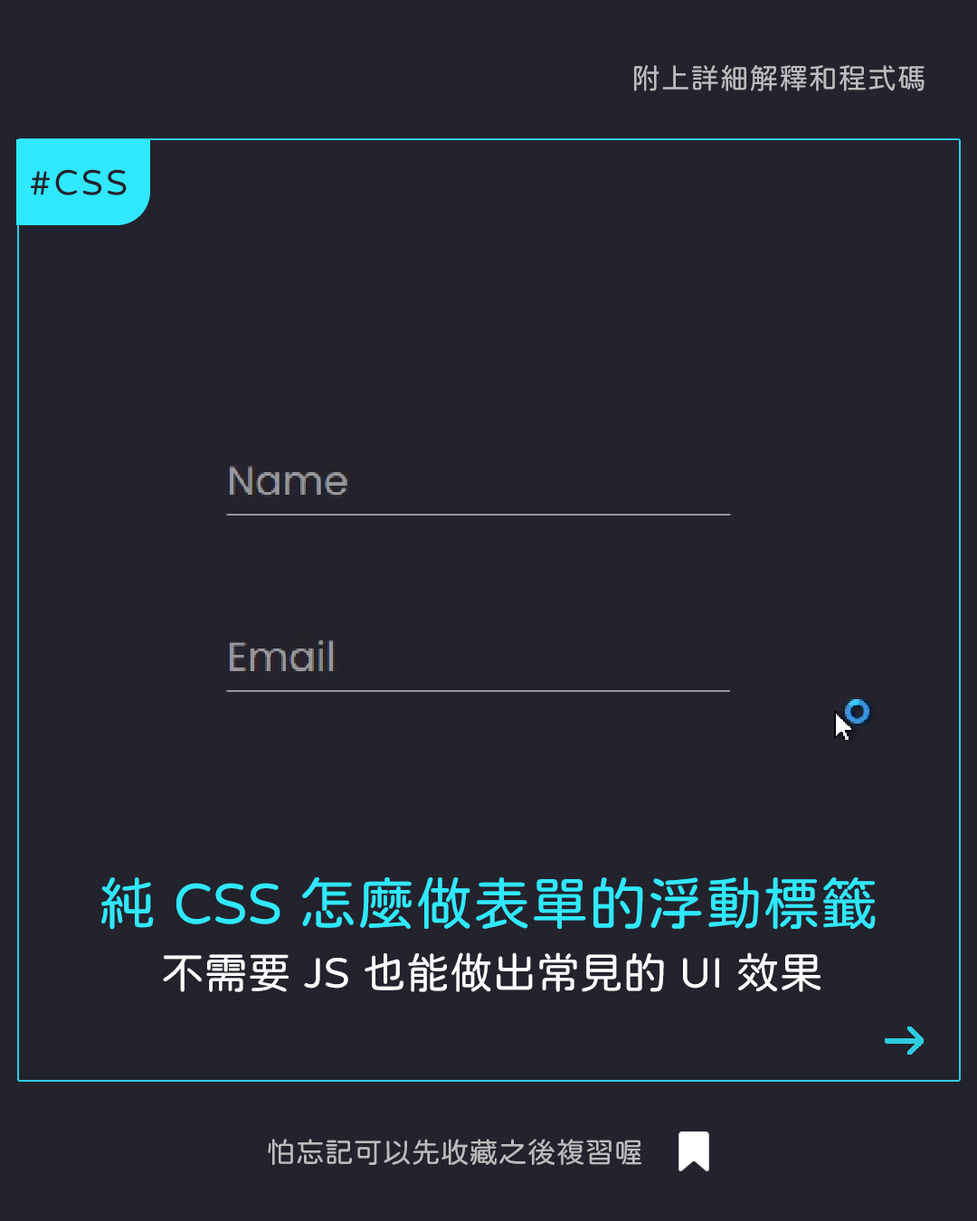
<style>
.page{position:relative;width:977px;height:1221px;background:#23232d}
.page>*{position:absolute;margin:0}
.t1{font:28.9px "jf-openhuninn-1.1";letter-spacing:0.02em;color:#bcbcbd}
.t2{font:36.2px "jf-openhuninn-1.1";letter-spacing:0.08em;color:#24232d}
.t3{font:57.9px "jf-openhuninn-1.1";color:#30e8ff}
.t4{font:43.4px "jf-openhuninn-1.1";color:#fefefe}
.t5{font:28.9px "jf-openhuninn-1.1";color:#bcbcbd}
</style>
<div class="page">
<p class="t1" style="left:634px;top:65px;width:290px;height:26px">附上詳細解釋和程式碼</p>
<p class="t2" style="left:30px;top:169px;width:97px;height:26px">#CSS</p>
<p class="t3" style="left:101px;top:877px;width:774px;height:53px">純 CSS 怎麼做表單的浮動標籤</p>
<p class="t4" style="left:163px;top:952px;width:658px;height:40px">不需要 JS 也能做出常見的 UI 效果</p>
<p class="t5" style="left:268px;top:1139px;width:373px;height:26px">怕忘記可以先收藏之後複習喔</p>
</div>
